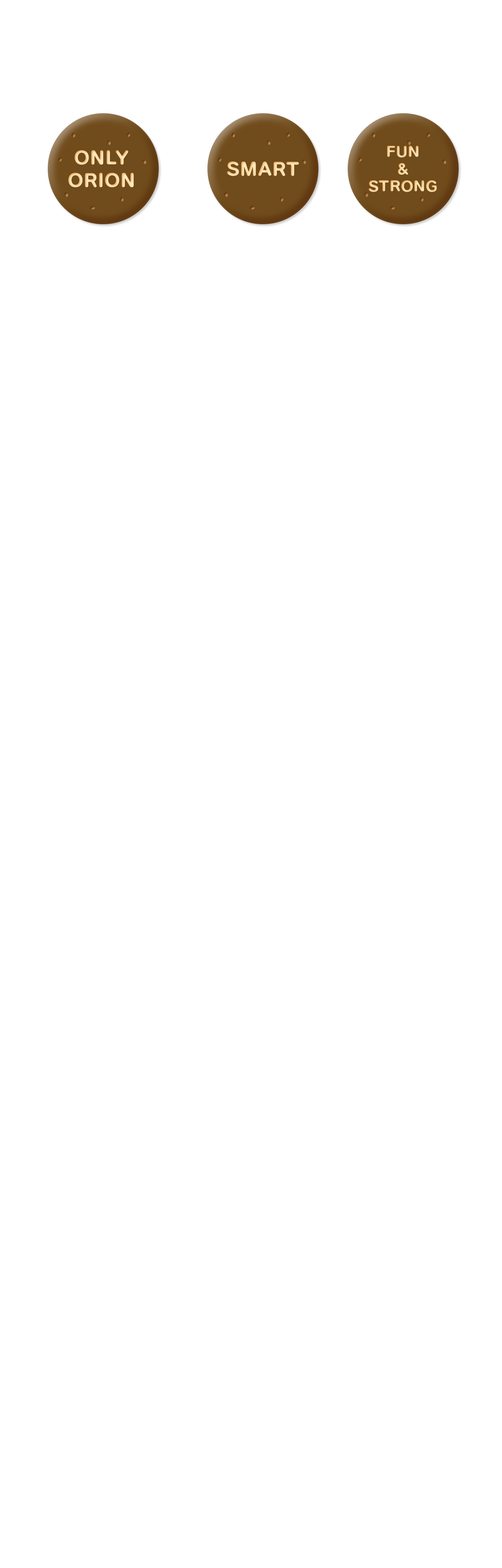
<style>
.page{position:relative;width:502px;height:1568px;background:#ffffff}
.page>*{position:absolute;margin:0}
.t1{font:15.1px/17.2px "TmoneyRoundWind-ExtraBold"}
.t2{font:18.8px "TmoneyRoundWind-ExtraBold"}
</style>
<div class="page">
<p class="t1" style="left:368px;top:146px;width:69px;height:46px;text-align:center">FUN<br>&amp;<br>STRONG</p>
<p class="t2" style="left:68px;top:150px;width:66px;height:38px;text-align:center">ONLY<br>ORION</p>
<p class="t2" style="left:227px;top:162px;width:72px;height:14px">SMART</p>
</div>
